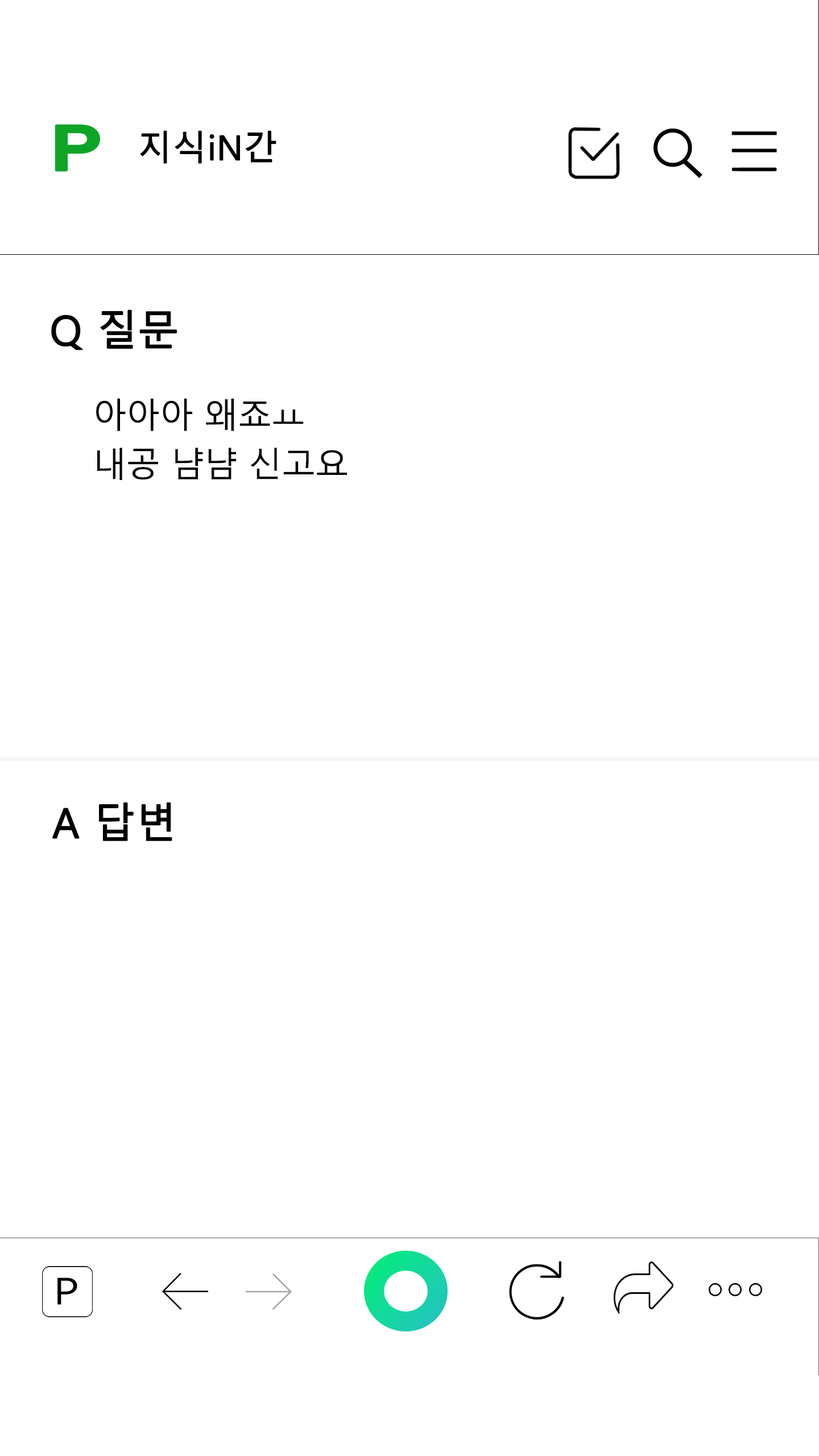
<style>
.page{position:relative;width:819px;height:1456px;background:#ffffff}
.page>*{position:absolute;margin:0}
.t1{font:67.6px "FranklinGothic-Medium";color:#0ea527;font-weight:bold;scale:1.26 1}
.t2{font:33.8px "MalgunGothic";color:#000000;font-weight:bold}
.t3{font:40.9px "MalgunGothic";letter-spacing:-0.02em;color:#000000;font-weight:bold}
.t4{font:34.1px "MalgunGothic";letter-spacing:-0.02em;color:#000000}
</style>
<div class="page">
<p class="t1" style="left:55px;top:124px;width:45px;height:48px">P</p>
<p class="t2" style="left:140px;top:130px;width:136px;height:34px">지식iN간</p>
<p class="t3" style="left:51px;top:309px;width:126px;height:41px">Q 질문</p>
<p class="t4" style="left:96px;top:398px;width:251px;height:82px">아아아 왜죠ㅛ <br>내공 냠냠 신고요</p>
<p class="t3" style="left:52px;top:802px;width:120px;height:39px">A 답변</p>
</div>
